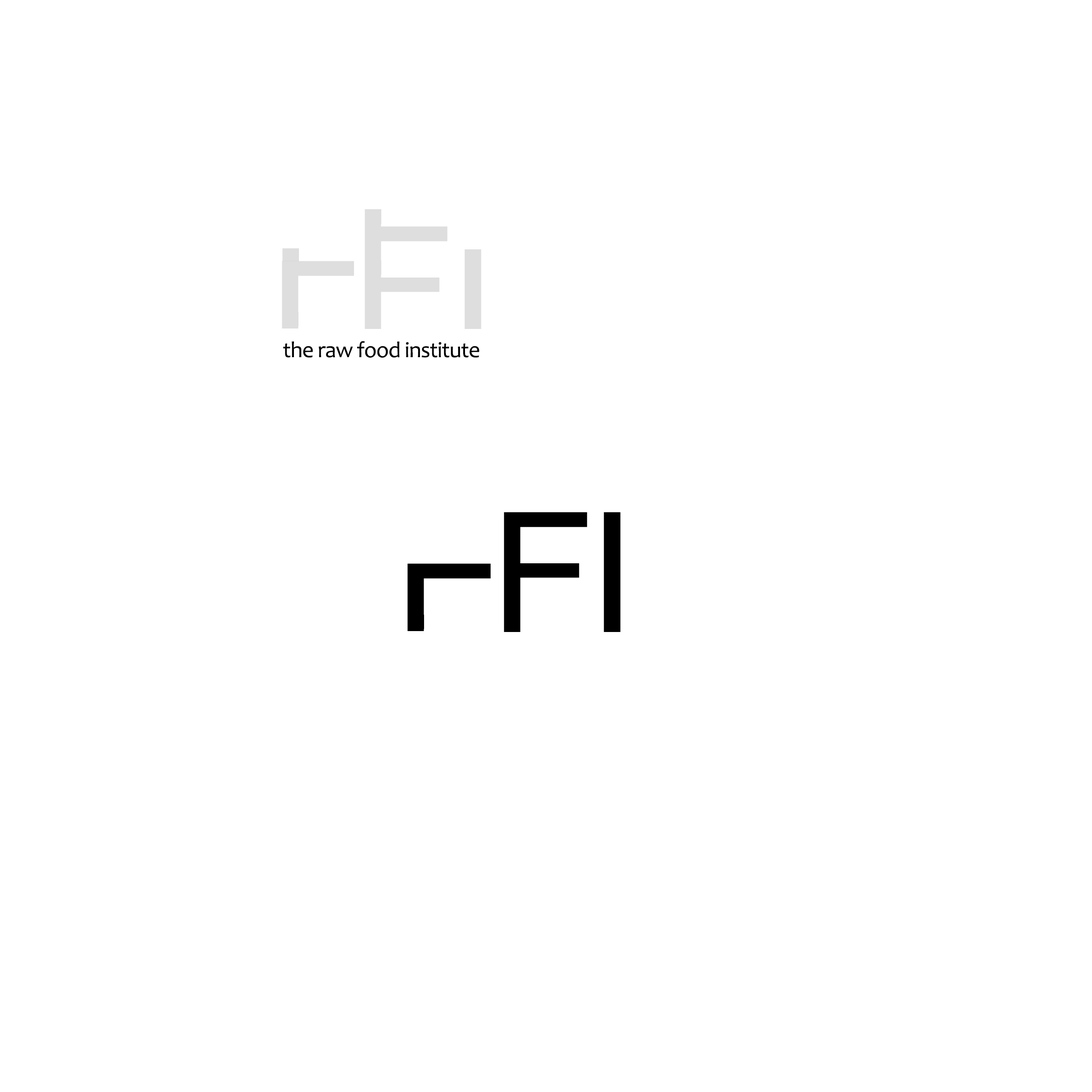
<style>
.page{position:relative;width:1092px;height:1092px;background:#ffffff}
.page>*{position:absolute;margin:0}
.t1{font:22.7px "Candara";letter-spacing:-0.025em;color:#000000}
</style>
<div class="page">
<p class="t1" style="left:283px;top:341px;width:197px;height:17px">the raw food institute</p>
</div>
